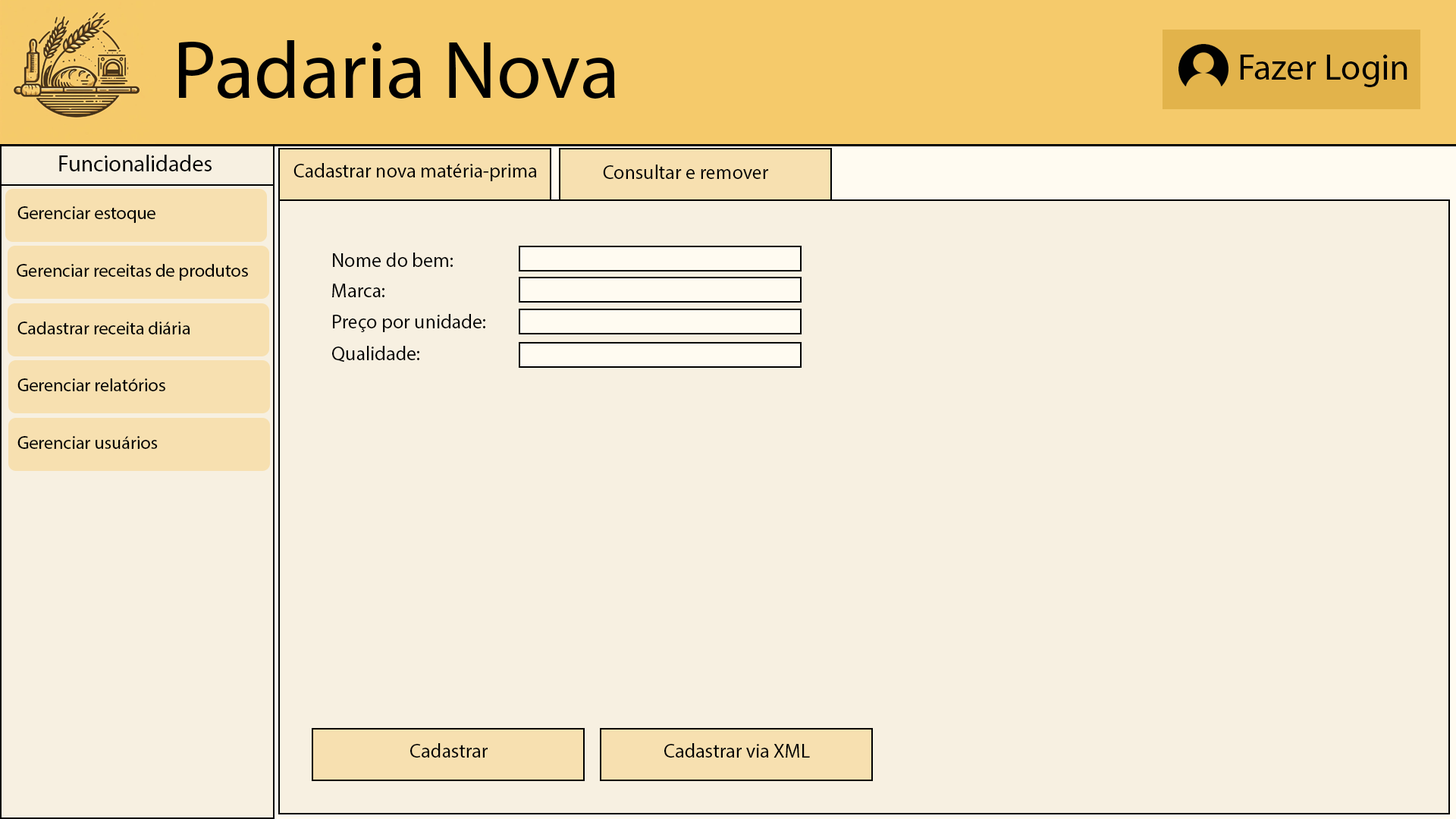
<style>
.page{position:relative;width:1456px;height:819px;background:#f7f0e1}
.page>*{position:absolute;margin:0}
.t1{font:81.6px "MyriadPro-Regular";color:#000000}
.t2{font:36.4px "MyriadPro-Regular";color:#000000}
.t3{font:22.7px "MyriadPro-Regular";color:#000000}
.t4{font:19.7px "MyriadPro-Regular";color:#000000}
.t5{font:18.2px "MyriadPro-Regular";color:#000000}
</style>
<div class="page">
<p class="t1" style="left:179px;top:40px;width:436px;height:59px">Padaria Nova</p>
<p class="t2" style="left:1240px;top:55px;width:167px;height:32px">Fazer Login</p>
<p class="t3" style="left:59px;top:155px;width:153px;height:16px">Funcionalidades</p>
<p class="t4" style="left:293px;top:163px;width:244px;height:18px">Cadastrar nova matéria-prima</p>
<p class="t4" style="left:603px;top:165px;width:165px;height:14px">Consultar e remover</p>
<p class="t5" style="left:17px;top:206px;width:138px;height:17px">Gerenciar estoque</p>
<p class="t4" style="left:333px;top:253px;width:120px;height:14px">Nome do bem:</p>
<p class="t5" style="left:17px;top:264px;width:231px;height:17px">Gerenciar receitas de produtos</p>
<p class="t4" style="left:332px;top:284px;width:52px;height:13px">Marca:</p>
<p class="t4" style="left:333px;top:314px;width:152px;height:18px">Preço por unidade:</p>
<p class="t5" style="left:17px;top:322px;width:173px;height:12px">Cadastrar receita diária</p>
<p class="t4" style="left:332px;top:346px;width:87px;height:16px">Qualidade:</p>
<p class="t5" style="left:17px;top:378px;width:148px;height:13px">Gerenciar relatórios</p>
<p class="t5" style="left:17px;top:436px;width:141px;height:13px">Gerenciar usuários</p>
<p class="t4" style="left:410px;top:743px;width:78px;height:15px">Cadastrar</p>
<p class="t4" style="left:664px;top:743px;width:146px;height:15px">Cadastrar via XML</p>
</div>
